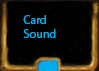
<style>
.page{position:relative;width:99px;height:71px;background:#000000}
.page>*{position:absolute;margin:0}
.t1{font:12px "MyriadPro-Regular";color:#00aeef}
</style>
<div class="page">
<p class="t1" style="left:23px;top:15px;width:33px;height:23px">Card<br>Sound</p>
</div>
